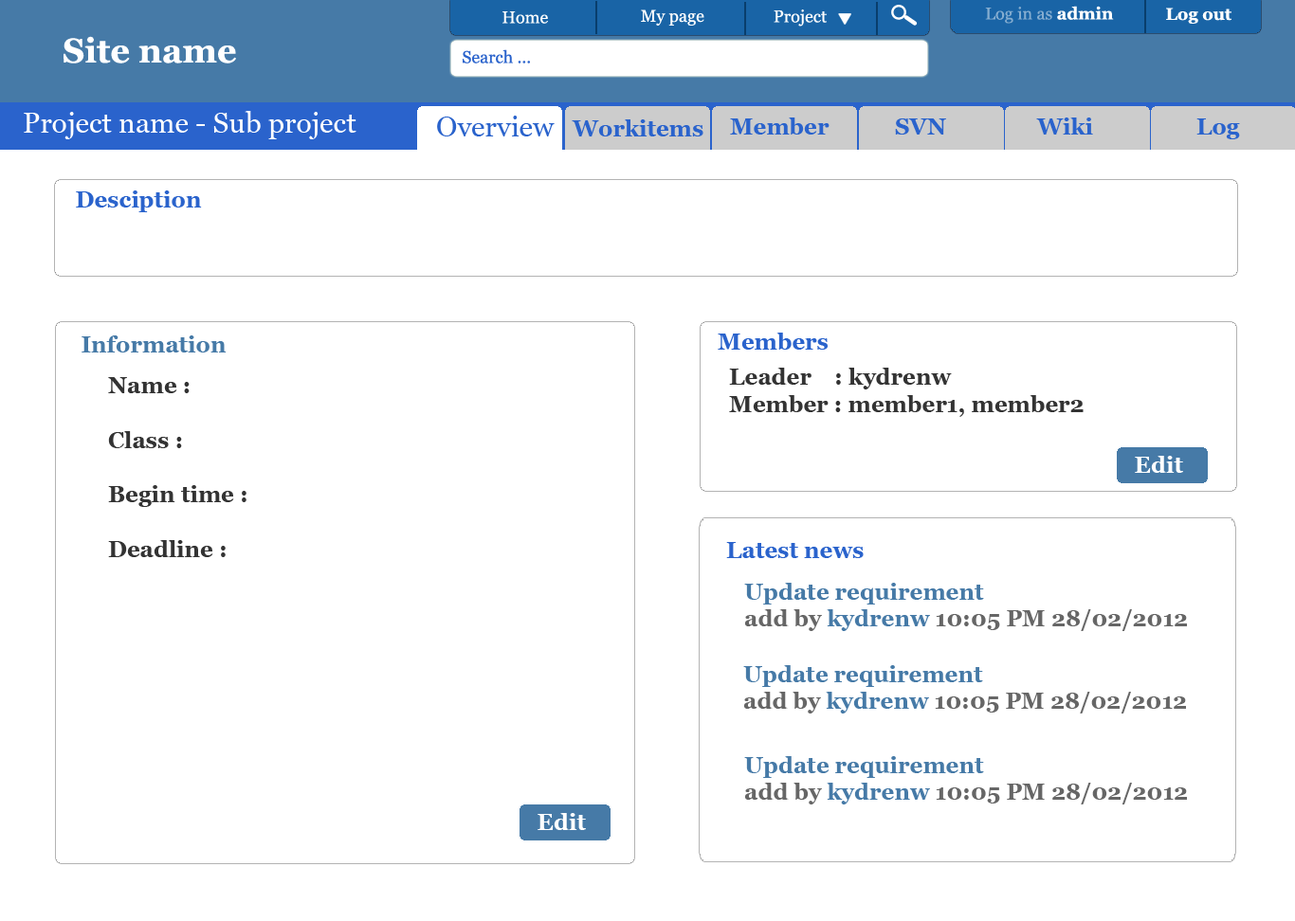
<style>
.page{position:relative;width:1295px;height:921px;background:#ffffff}
.page>*{position:absolute;margin:0}
.t1{font:17.1px "Vani";color:#85add0}
.t2{font:17.1px "Vani-Bold";color:#ffffff}
.t3{font:17.1px "Vani";color:#ffffff}
.t4{font:34.1px "Vani-Bold";color:#ffffff}
.t5{font:17.1px "Vani";color:#2a63cc}
.t6{font:28.4px "Vani";color:#ffffff}
.t7{font:28.4px "Vani";color:#2a63cc}
.t8{font:22.7px "Vani-Bold";color:#2a63cc}
.t9{font:22.7px "Vani-Bold";color:#467aa7}
.t10{font:22.7px "Vani-Bold";color:#333333}
.t11{font:22.7px "Vani-Bold";color:#ffffff}
.t12{font:22.7px "Vani-Bold";color:#666666}
</style>
<div class="page">
<p class="t1" style="left:985px;top:6px;width:129px;height:18px">Log in as <span class="t2">admin</span></p>
<p class="t3" style="left:502px;top:11px;width:46px;height:13px">Home</p>
<p class="t3" style="left:641px;top:9px;width:63px;height:17px">My page</p>
<p class="t3" style="left:773px;top:9px;width:53px;height:18px">Project</p>
<p class="t2" style="left:1166px;top:8px;width:65px;height:16px">Log out</p>
<p class="t4" style="left:63px;top:36px;width:173px;height:27px">Site name</p>
<p class="t5" style="left:462px;top:49px;width:68px;height:14px">Search ...</p>
<p class="t6" style="left:24px;top:111px;width:332px;height:28px">Project name - Sub project</p>
<p class="t7" style="left:437px;top:116px;width:117px;height:20px">Overview</p>
<p class="t8" style="left:571px;top:119px;width:132px;height:17px">Workitems</p>
<p class="t8" style="left:730px;top:118px;width:99px;height:17px">Member</p>
<p class="t8" style="left:895px;top:118px;width:51px;height:17px">SVN</p>
<p class="t8" style="left:1036px;top:118px;width:57px;height:17px">Wiki</p>
<p class="t8" style="left:1196px;top:118px;width:44px;height:21px">Log</p>
<p class="t8" style="left:76px;top:190px;width:126px;height:22px">Desciption</p>
<p class="t9" style="left:81px;top:335px;width:145px;height:18px">Information</p>
<p class="t8" style="left:717px;top:333px;width:110px;height:17px">Members</p>
<p class="t10" style="left:108px;top:377px;width:138px;height:180px">Name :<br><br>Class :<br><br>Begin time :<br><br>Deadline :</p>
<p class="t10" style="left:729px;top:368px;width:354px;height:49px">Leader    : kydrenw<br>Member : member1, member2</p>
<p class="t11" style="left:1134px;top:456px;width:49px;height:17px">Edit</p>
<p class="t8" style="left:726px;top:542px;width:137px;height:16px">Latest news</p>
<p class="t12" style="left:744px;top:583px;width:442px;height:48px"><span class="t9">Update requirement<br></span>add by <span class="t9">kydrenw </span>10:05 PM 28/02/2012</p>
<p class="t12" style="left:743px;top:665px;width:443px;height:49px"><span class="t9">Update requirement<br></span>add by <span class="t9">kydrenw </span>10:05 PM 28/02/2012</p>
<p class="t12" style="left:744px;top:756px;width:442px;height:49px"><span class="t9">Update requirement<br></span>add by <span class="t9">kydrenw </span>10:05 PM 28/02/2012</p>
<p class="t11" style="left:537px;top:813px;width:49px;height:17px">Edit</p>
</div>
